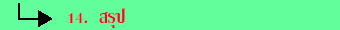
<style>
.page{position:relative;width:340px;height:30px;background:#62fe9c}
.page>*{position:absolute;margin:0}
.t1{font:25px "KodchiangUPCBold";color:#ff002a}
</style>
<div class="page">
<p class="t1" style="left:68px;top:8px;width:58px;height:20px">14.  สรุป</p>
</div>
